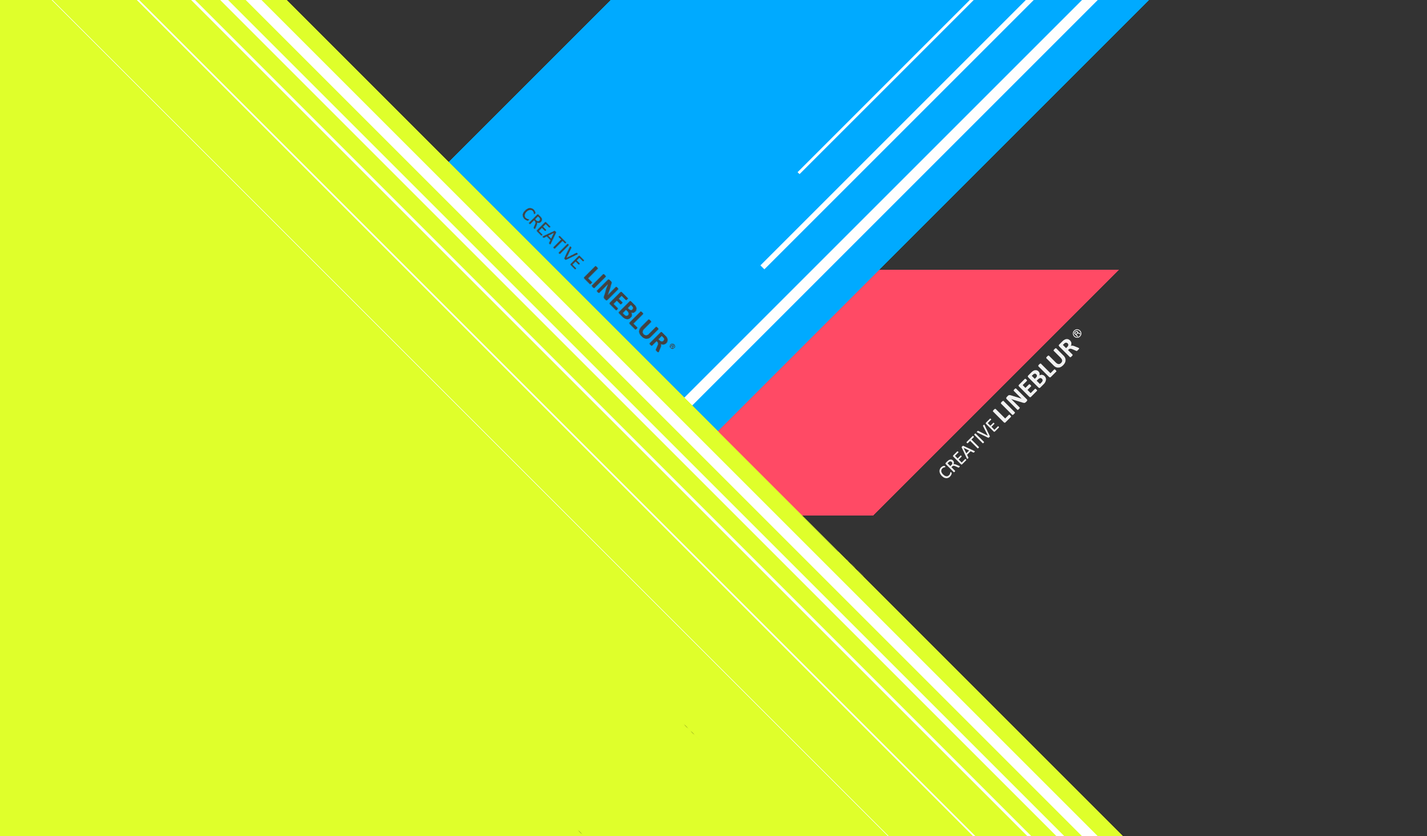
<style>
.page{position:relative;width:1427px;height:836px;background:#dfff2b}
.page>*{position:absolute;margin:0}
.t1{font:11.1px "Gulim";color:#f1f1f1}
.t2{font:26.7px "Calibri-Bold";color:#f1f1f1}
.t3{font:19.5px "Calibri";color:#f1f1f1}
</style>
<div class="page">
<p class="t1" style="left:1072px;top:329px;width:9px;height:9px;rotate:-45deg">®</p>
<p class="t2" style="left:992px;top:339px;width:87px;height:84px;rotate:-45deg">LINEBLUR</p>
<p class="t3" style="left:939px;top:418px;width:60px;height:60px;rotate:-45deg">CREATIVE</p>
</div>
